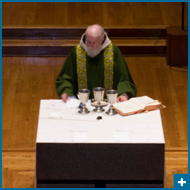
<style>
.page{position:relative;width:190px;height:190px}
.page>*{position:absolute;margin:0}
.t1{font:20.5px "TerminalDosis-SemiBold";letter-spacing:0.025em;color:#ffffff}
</style>
<div class="page">
<p class="t1" style="left:177px;top:178px;width:9px;height:9px">+</p>
</div>
